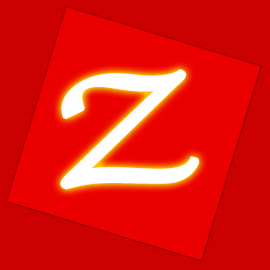
<style>
.page{position:relative;width:270px;height:270px;background:#cc0000}
.page>*{position:absolute;margin:0}
.t1{font:159.4px "Apple-Chancery";color:#ffffff;font-weight:bold;scale:1.6 1}
</style>
<div class="page">
<p class="t1" style="left:60px;top:69px;width:140px;height:121px;rotate:-3deg">Z</p>
</div>
